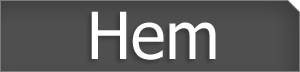
<style>
.page{position:relative;width:300px;height:72px;background:#4f4f4f}
.page>*{position:absolute;margin:0}
.t1{font:65px "Tahoma";color:#ffffff}
</style>
<div class="page">
<p class="t1" style="left:91px;top:11px;width:125px;height:49px">Hem</p>
</div>
